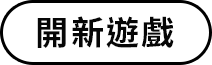
<style>
.page{position:relative;width:212px;height:65px;background:#ffffff}
.page>*{position:absolute;margin:0}
.t1{font:33.3px "NotoSansCJKtc-Bold";letter-spacing:0.06em;color:#060606}
</style>
<div class="page">
<p class="t1" style="left:37px;top:16px;width:137px;height:32px">開新遊戲</p>
</div>
